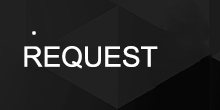
<style>
.page{position:relative;width:220px;height:110px}
.page>*{position:absolute;margin:0}
.t1{font:28px "ArialMT";color:#ffffff}
</style>
<div class="page">
<p class="t1" style="left:24px;top:46px;width:134px;height:23px">REQUEST</p>
</div>
